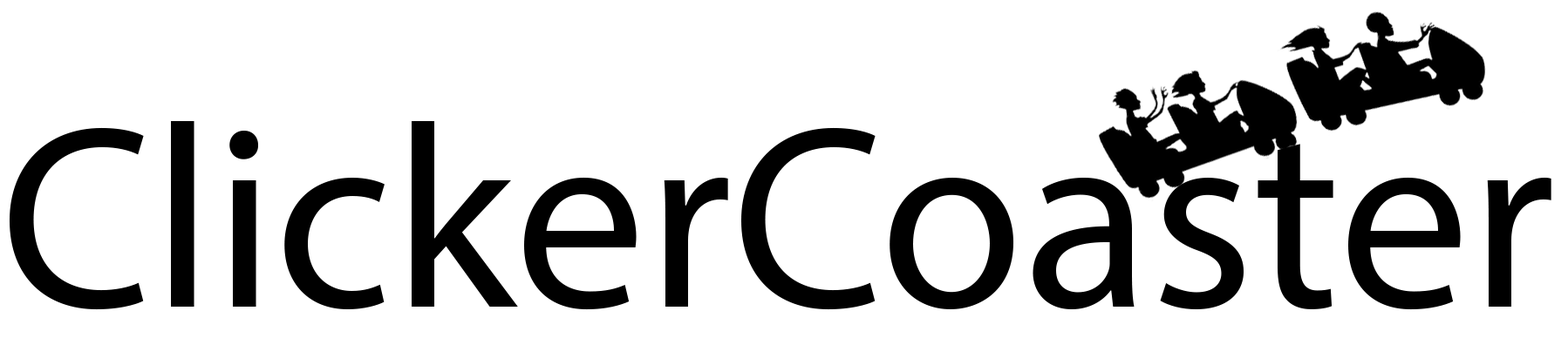
<style>
.page{position:relative;width:1568px;height:338px;background:#ffffff}
.page>*{position:absolute;margin:0}
.t1{font:261.6px "MyriadPro-Regular";color:#000000}
</style>
<div class="page">
<p class="t1" style="left:10px;top:121px;width:1541px;height:189px">ClickerCoaster</p>
</div>
